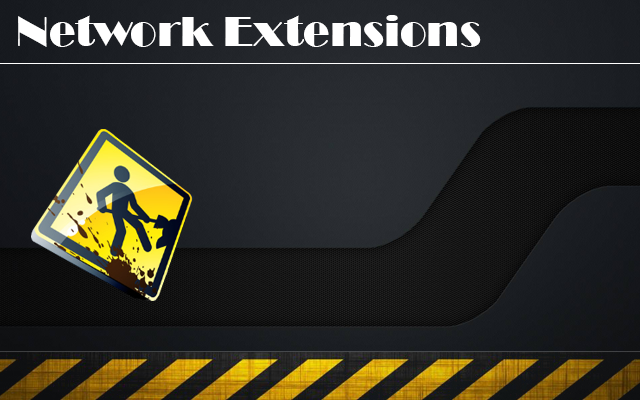
<style>
.page{position:relative;width:640px;height:400px}
.page>*{position:absolute;margin:0}
.t1{font:44px "Broadway";color:#ffffff}
</style>
<div class="page">
<p class="t1" style="left:18px;top:15px;width:463px;height:32px">Network Extensions</p>
</div>
